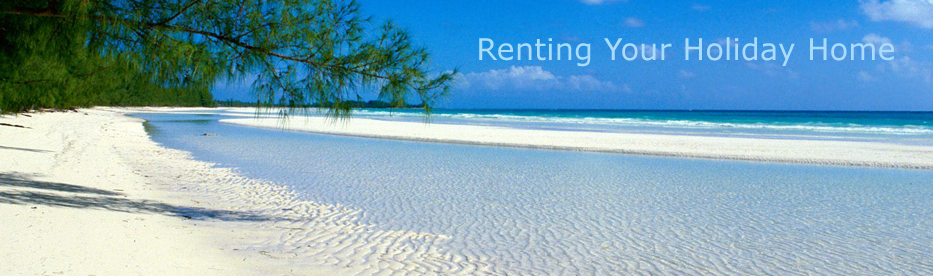
<style>
.page{position:relative;width:933px;height:276px}
.page>*{position:absolute;margin:0}
.t1{font:30px "Verdana";letter-spacing:0.01em;color:#a9dcfb}
</style>
<div class="page">
<p class="t1" style="left:479px;top:37px;width:415px;height:30px">Renting Your Holiday Home</p>
</div>
